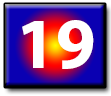
<style>
.page{position:relative;width:111px;height:96px;background:#ffffff}
.page>*{position:absolute;margin:0}
.t1{font:72px "MyriadPro-Bold";color:#ffffff}
</style>
<div class="page">
<p class="t1" style="left:22px;top:20px;width:72px;height:49px">19</p>
</div>
